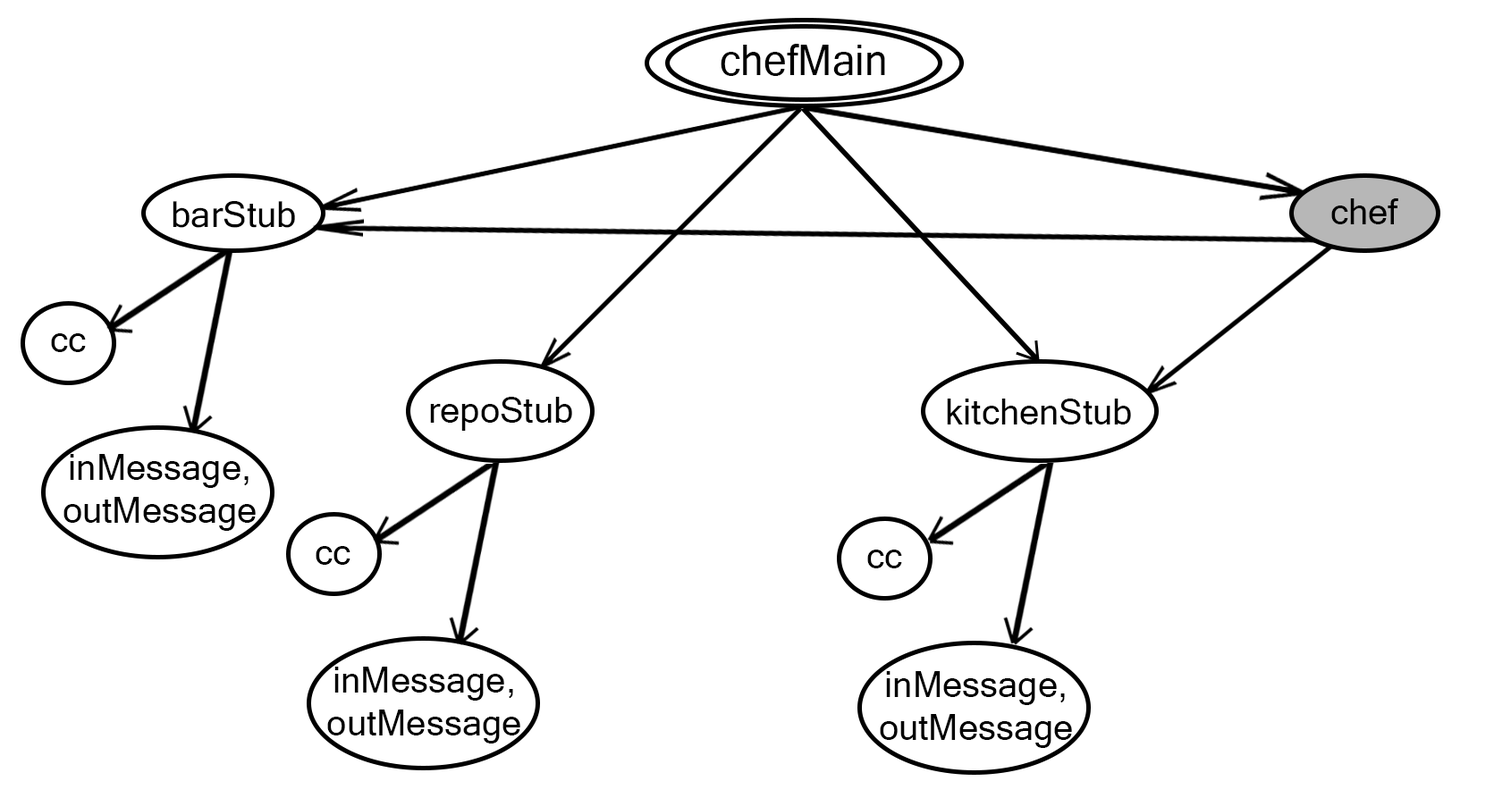
<style>
.page{position:relative;width:1494px;height:798px;background:#ffffff}
.page>*{position:absolute;margin:0}
.t1{font:42.9px "MicrosoftSansSerif";color:#000000;scale:0.96 1}
.t2{font:35.8px "MicrosoftSansSerif";color:#000000}
</style>
<div class="page">
<p class="t1" style="left:721px;top:44px;width:164px;height:32px">chefMain</p>
<p class="t2" style="left:173px;top:201px;width:122px;height:27px">barStub</p>
<p class="t2" style="left:1331px;top:198px;width:67px;height:26px">chef</p>
<p class="t2" style="left:51px;top:333px;width:35px;height:19px">cc</p>
<p class="t2" style="left:430px;top:397px;width:142px;height:34px">repoStub</p>
<p class="t2" style="left:947px;top:399px;width:184px;height:26px">kitchenStub</p>
<p class="t2" style="left:63px;top:454px;width:193px;height:77px;text-align:center">inMessage,<br>outMessage</p>
<p class="t2" style="left:316px;top:546px;width:34px;height:19px">cc</p>
<p class="t2" style="left:867px;top:550px;width:35px;height:19px">cc</p>
<p class="t2" style="left:327px;top:667px;width:193px;height:77px;text-align:center">inMessage,<br>outMessage</p>
<p class="t2" style="left:880px;top:671px;width:192px;height:77px;text-align:center">inMessage,<br>outMessage</p>
</div>
